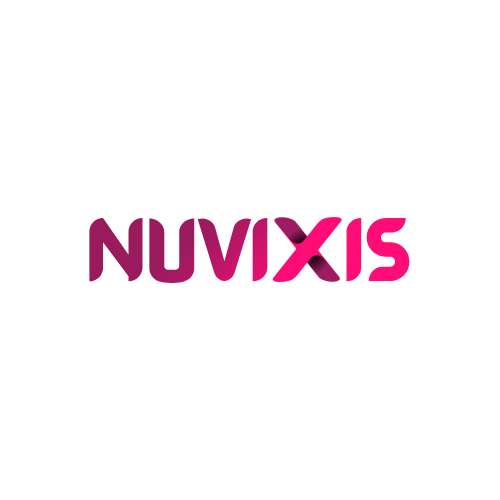
<style>
.page{position:relative;width:500px;height:500px;background:#ffffff}
.page>*{position:absolute;margin:0}
.t1{font:67px "BARABARAFINALRegular"}
</style>
<div class="page">
<p class="t1" style="left:89px;top:216px;width:321px;height:67px">NUVI      IS</p>
</div>
